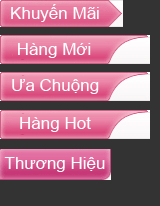
<style>
.page{position:relative;width:160px;height:206px;background:#333333}
.page>*{position:absolute;margin:0}
.t1{font:17px "ArialMT";color:#ffffff}
</style>
<div class="page">
<p class="t1" style="left:11px;top:4px;width:88px;height:18px">Khuyến Mãi</p>
<p class="t1" style="left:18px;top:43px;width:73px;height:15px">Hàng Mới</p>
<p class="t1" style="left:12px;top:79px;width:87px;height:15px">Ưa Chuộng</p>
<p class="t1" style="left:20px;top:117px;width:71px;height:15px">Hàng Hot</p>
<p class="t1" style="left:4px;top:157px;width:101px;height:15px">Thương Hiệu</p>
</div>
